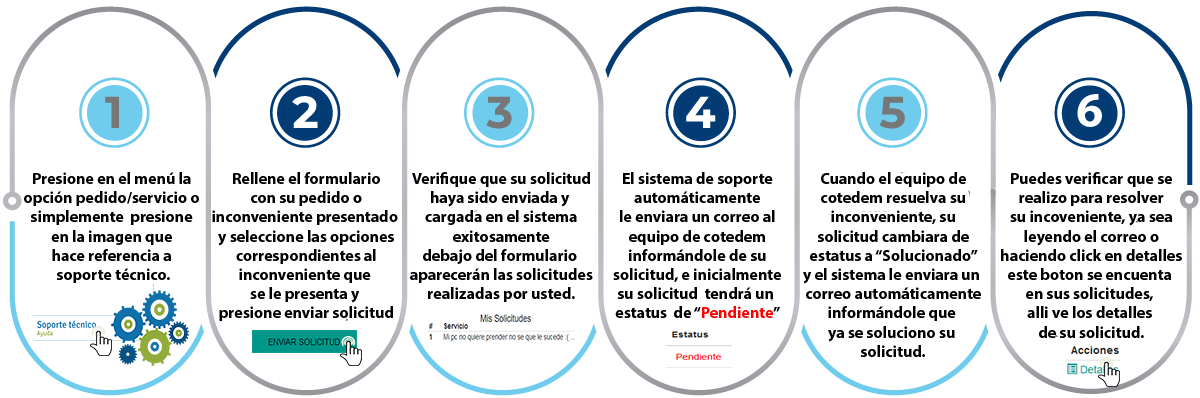
<style>
.page{position:relative;width:1200px;height:398px;background:#ffffff}
.page>*{position:absolute;margin:0}
.t1{font:16px "MyriadPro-Bold";color:#000000}
.t2{font:16px "MyriadPro-Bold";color:#ff0000}
</style>
<div class="page">
<p class="t1" style="left:24px;top:172px;width:175px;height:111px;text-align:center">Presione en el menú la <br>opción pedido/servicio o <br>simplemente  presione <br>en la imagen que <br>hace referencia a <br>soporte técnico.</p>
<p class="t1" style="left:212px;top:172px;width:186px;height:149px;text-align:center">Rellene el formulario<br>con su pedido o<br>inconveniente presentado <br>y seleccione las opciones<br>correspondientes al<br>inconveniente que <br>se le presenta y <br>presione enviar solicitud</p>
<p class="t1" style="left:410px;top:172px;width:183px;height:130px;text-align:center">Verifique que su solicitud<br>haya sido enviada y <br>cargada en el sistema<br>exitosamente<br>debajo del formulario <br>aparecerán las solicitudes<br>realizadas por usted.</p>
<p class="t1" style="left:613px;top:172px;width:168px;height:146px;text-align:center">El sistema de soporte<br>automáticamente<br>le enviara un correo al<br>equipo de cotedem<br>informándole de su<br>solicitud, e inicialmente<br>su solicitud  tendrá un <br>estatus  de “<span class="t2">Pendiente</span>”</p>
<p class="t1" style="left:803px;top:172px;width:178px;height:185px;text-align:center">Cuando el equipo de<br>cotedem resuelva su<br>inconveniente, su<br>solicitud cambiara de<br>estatus a “Solucionado”<br>y el sistema le enviara un <br>correo automáticamente<br>informándole que <br>ya se soluciono su <br>solicitud.</p>
<p class="t1" style="left:1001px;top:172px;width:181px;height:166px;text-align:center">Puedes verificar que se<br>realizo para resolver<br>su incoveniente, ya sea<br>leyendo el correo o<br>haciendo click en detalles<br>este boton se encuenta <br>en sus solicitudes, <br>alli ve los detalles <br>de su solicitud.</p>
</div>
